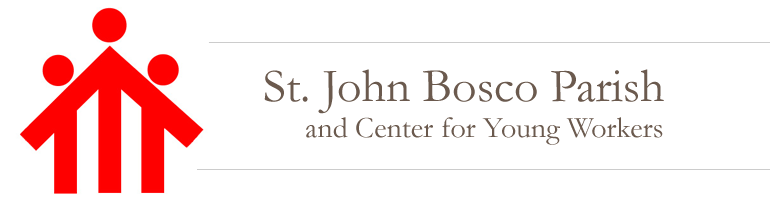
<style>
.page{position:relative;width:770px;height:198px;background:#ffffff}
.page>*{position:absolute;margin:0}
.t1{font:48px "Garamond";color:#6b5a4e}
.t2{font:30px "Garamond";color:#6b5a4e}
</style>
<div class="page">
<p class="t1" style="left:264px;top:69px;width:400px;height:45px">St. John Bosco Parish</p>
<p class="t2" style="left:306px;top:117px;width:357px;height:28px">and Center for Young Workers</p>
</div>
